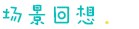
<style>
.page{position:relative;width:139px;height:29px;background:#ffffff}
.page>*{position:absolute;margin:0}
.t1{font:22px "BauhausITC";letter-spacing:0.1em;color:#02c1bf}
</style>
<div class="page">
<p class="t1" style="left:2px;top:4px;width:93px;height:22px">场景回想</p>
</div>
